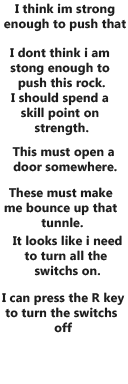
<style>
.page{position:relative;width:128px;height:384px;background:#ffffff}
.page>*{position:absolute;margin:0}
.t1{font:12.5px "MicrosoftPhagsPa-Bold";letter-spacing:0.01em;color:#1e1e1e}
</style>
<div class="page">
<p class="t1" style="left:4px;top:3px;width:122px;height:29px;text-align:center">I think im strong <br>enough to push that</p>
<p class="t1" style="left:10px;top:47px;width:100px;height:89px;text-align:center">I dont think i am <br>stong enough to <br>push this rock.<br>I should spend a <br>skill point on <br>strength.</p>
<p class="t1" style="left:12px;top:146px;width:105px;height:26px;text-align:center">This must open a <br>door somewhere.</p>
<p class="t1" style="left:4px;top:187px;width:113px;height:41px;text-align:center">These must make <br>me bounce up that <br>tunnle.</p>
<p class="t1" style="left:12px;top:235px;width:110px;height:41px;text-align:center">It looks like i need<br>to turn all the <br>switchs on.</p>
<p class="t1" style="left:2px;top:292px;width:123px;height:41px;text-align:center">I can press the R key<br>to turn the switchs <br>off</p>
</div>
